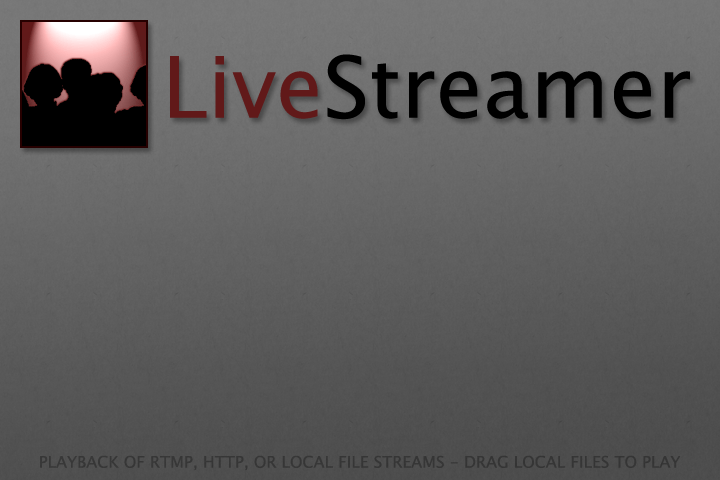
<style>
.page{position:relative;width:720px;height:480px}
.page>*{position:absolute;margin:0}
.t1{font:85px "LucidaSansUnicode";color:#000000}
.t2{font:85px "LucidaSansUnicode";color:#611919}
.t3{font:16px "LucidaSansUnicode";color:#363636;text-transform:uppercase}
</style>
<div class="page">
<p class="t1" style="left:170px;top:54px;width:520px;height:66px"><span class="t2">Live</span>Streamer</p>
<p class="t3" style="left:40px;top:455px;width:641px;height:16px">Playback of RTMP, HTTP, or local file streams - Drag Local Files To Play</p>
</div>
